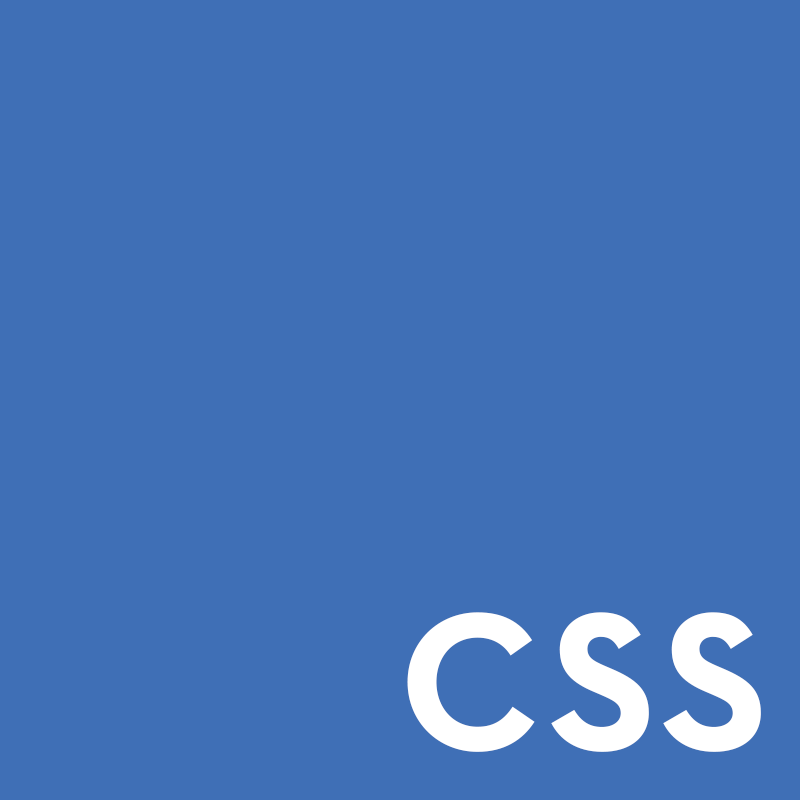
<style>
.page{position:relative;width:800px;height:800px;background:#3f6fb6}
.page>*{position:absolute;margin:0}
.t1{font:200px "NeutraText-Bold";letter-spacing:0.025em;color:#ffffff}
</style>
<div class="page">
<p class="t1" style="left:407px;top:612px;width:354px;height:140px">CSS</p>
</div>
